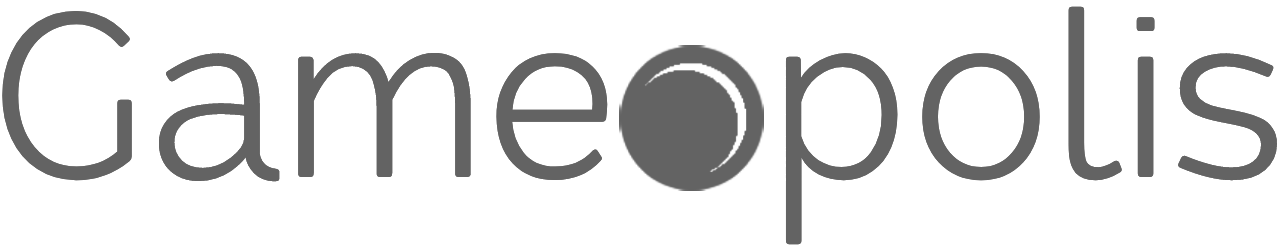
<style>
.page{position:relative;width:1280px;height:250px;background:#ffffff}
.page>*{position:absolute;margin:0}
.t1{font:226.9px "Redshift-Light";color:#636363}
</style>
<div class="page">
<p class="t1" style="left:2px;top:6px;width:1275px;height:239px">Game  polis</p>
<p class="t1" style="left:2px;top:6px;width:1275px;height:239px">Game  polis</p>
</div>
